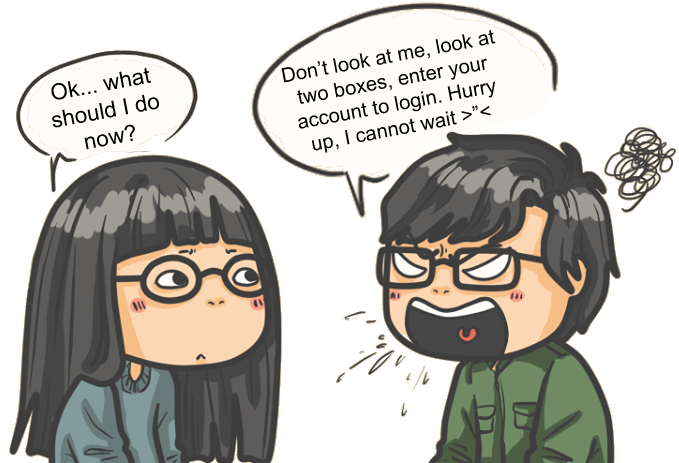
<style>
.page{position:relative;width:679px;height:463px;background:#ffffff}
.page>*{position:absolute;margin:0}
.t1{font:20.2px "ArialMT";color:#010101}
.t2{font:22.5px "ArialMT";color:#010101}
</style>
<div class="page">
<p class="t1" style="left:281px;top:29px;width:215px;height:124px;rotate:-11deg">Don’t look at me, look at two boxes, enter your account to login. Hurry up, I cannot wait &gt;”&lt;</p>
<p class="t2" style="left:51px;top:67px;width:108px;height:83px;rotate:-11deg">Ok... what should I do now?</p>
</div>
